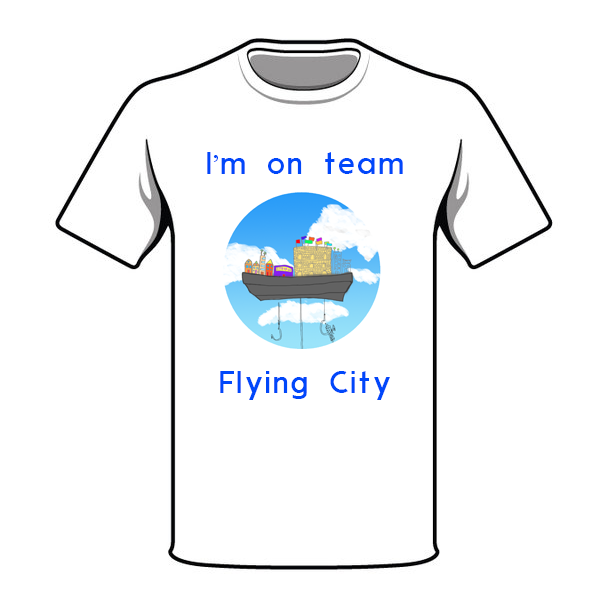
<style>
.page{position:relative;width:597px;height:597px;background:#ffffff}
.page>*{position:absolute;margin:0}
.t1{font:30px "ModernSans";letter-spacing:0.025em;color:#0047fa}
.t2{font:30px "KhmerMN";letter-spacing:0.025em;color:#0047fa}
</style>
<div class="page">
<p class="t1" style="left:207px;top:152px;width:196px;height:22px">I<span class="t2">’</span>m on team</p>
<p class="t1" style="left:220px;top:371px;width:170px;height:29px">Flying City</p>
</div>
